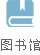
<style>
.page{position:relative;width:40px;height:55px;background:#ffffff}
.page>*{position:absolute;margin:0}
.t1{font:22.5px "SimSun";letter-spacing:0.075em;color:#666666;font-variant:small-caps}
</style>
<div class="page">
<p class="t1" style="left:1px;top:39px;width:39px;height:12px">图书馆</p>
</div>
